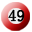
<style>
.page{position:relative;width:32px;height:32px;background:#ffffff}
.page>*{position:absolute;margin:0}
.t1{font:16px "SimSun";color:#000000;font-weight:bold}
</style>
<div class="page">
<p class="t1" style="left:8px;top:9px;width:17px;height:13px">49</p>
</div>
